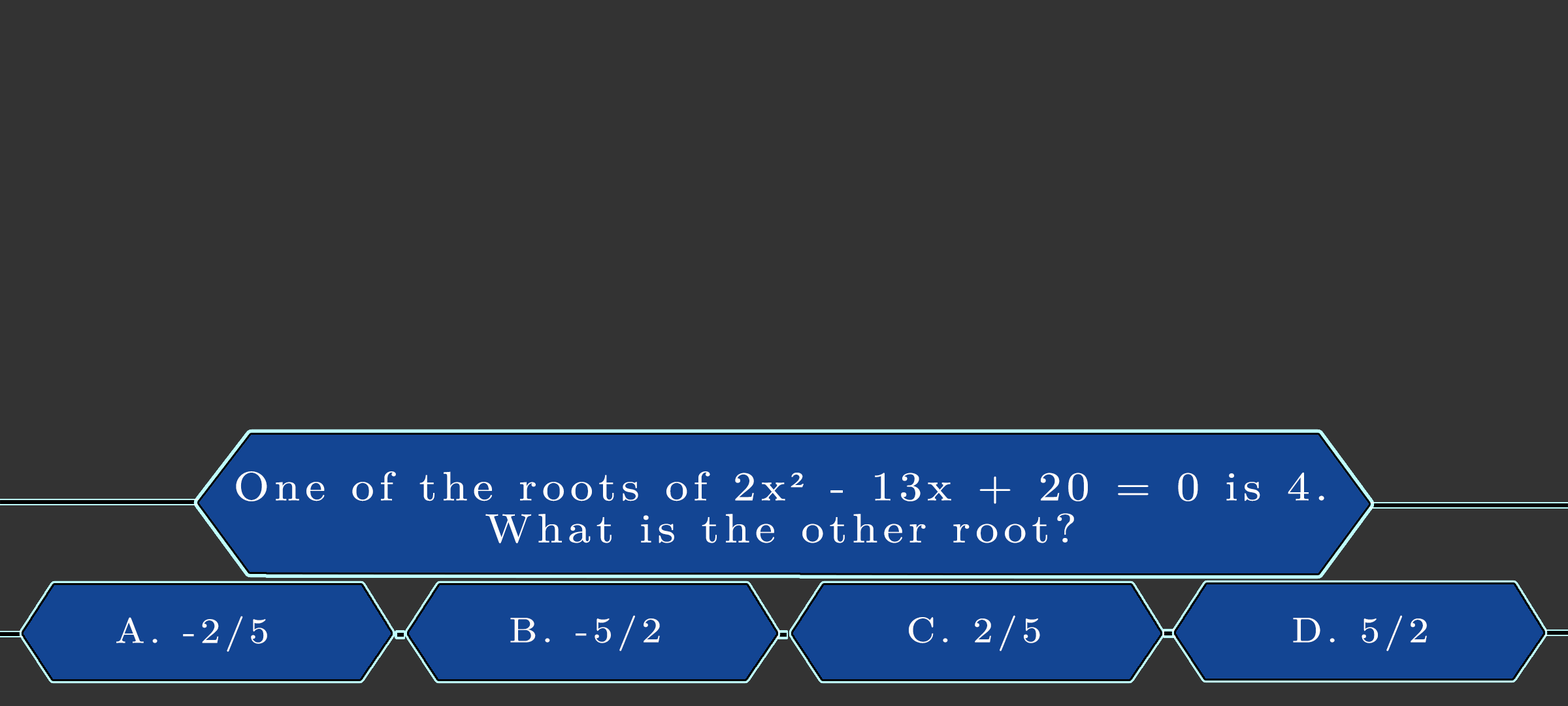
<style>
.page{position:relative;width:1568px;height:706px;background:#333333}
.page>*{position:absolute;margin:0}
.t1{font:40.9px/42px "LatinModernMath-Regular";letter-spacing:0.115em;color:#ffffff;scale:1.12 1}
.t2{font:40.9px/42px "TimesNewRomanPSMT";letter-spacing:0.115em;color:#ffffff;scale:1.12 1}
.t3{font:35.4px "LatinModernMath-Regular";letter-spacing:0.115em;color:#fdfdfd;text-transform:uppercase;scale:1.12 1}
.t4{font:35.4px "LatinModernMath-Regular";letter-spacing:0.115em;color:#fcf9f9;text-transform:uppercase;scale:1.12 1}
.t5{font:35.4px "LatinModernMath-Regular";letter-spacing:0.115em;color:#fdfcfc;text-transform:uppercase;scale:1.12 1}
.t6{font:35.4px "LatinModernMath-Regular";letter-spacing:0.115em;color:#fffdfd;scale:1.12 1}
</style>
<div class="page">
<p class="t1" style="left:236px;top:471px;width:1088px;height:73px;text-align:center">One of the roots of 2x<span class="t2">²</span> - 13x + 20 = 0 is 4.<br>What is the other root?</p>
<p class="t3" style="left:116px;top:615px;width:151px;height:36px">A. -2/5</p>
<p class="t4" style="left:510px;top:615px;width:150px;height:36px">B. -5/2</p>
<p class="t5" style="left:909px;top:615px;width:131px;height:36px">C. 2/5</p>
<p class="t6" style="left:1293px;top:615px;width:134px;height:36px">D. 5/2</p>
</div>
